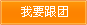
<style>
.page{position:relative;width:87px;height:25px}
.page>*{position:absolute;margin:0}
.t1{font:12px "SimSun";color:#ffffff}
</style>
<div class="page">
<p class="t1" style="left:21px;top:6px;width:47px;height:11px">我要跟团</p>
</div>
